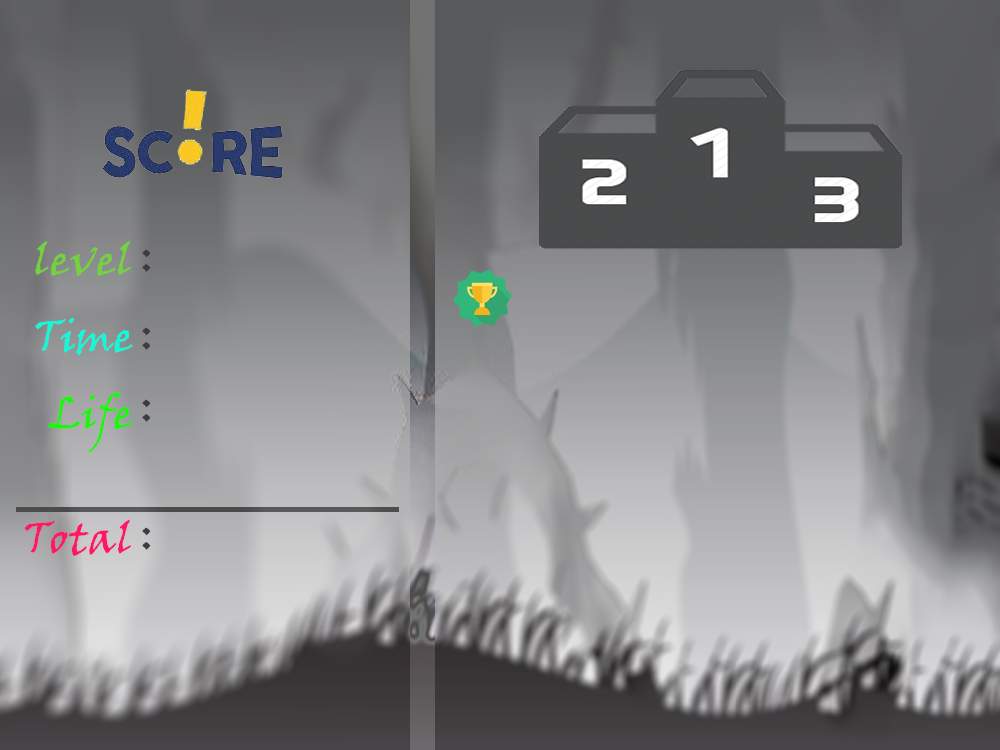
<style>
.page{position:relative;width:1000px;height:750px}
.page>*{position:absolute;margin:0}
.t1{font:44px "VinerHandITC";color:#72d33c}
.t2{font:44px "VinerHandITC";color:#0efadb}
.t3{font:44px "VinerHandITC";color:#1cf60c}
.t4{font:44px "VinerHandITC";color:#ff1763}
.t5{font:44px "VinerHandITC";color:#403c3d}
</style>
<div class="page">
<p class="t1" style="left:24px;top:241px;width:109px;height:315px">level<br><br><span class="t2">Time<br><br></span><span class="t3">Life<br><br><br><br></span><span class="t4">Total</span></p>
<p class="t5" style="left:142px;top:249px;width:9px;height:23px">:</p>
<p class="t5" style="left:142px;top:327px;width:9px;height:23px">:</p>
<p class="t5" style="left:142px;top:399px;width:9px;height:23px">:</p>
<p class="t5" style="left:142px;top:527px;width:9px;height:23px">:</p>
</div>
